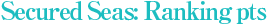
<style>
.page{position:relative;width:267px;height:25px;background:#ffffff}
.page>*{position:absolute;margin:0}
.t1{font:25px "RyuminPro-ExBold";letter-spacing:-0.08em;color:#1cbdc0}
</style>
<div class="page">
<p class="t1" style="left:1px;top:1px;width:266px;height:23px">Secured Seas: Ranking pts</p>
</div>
